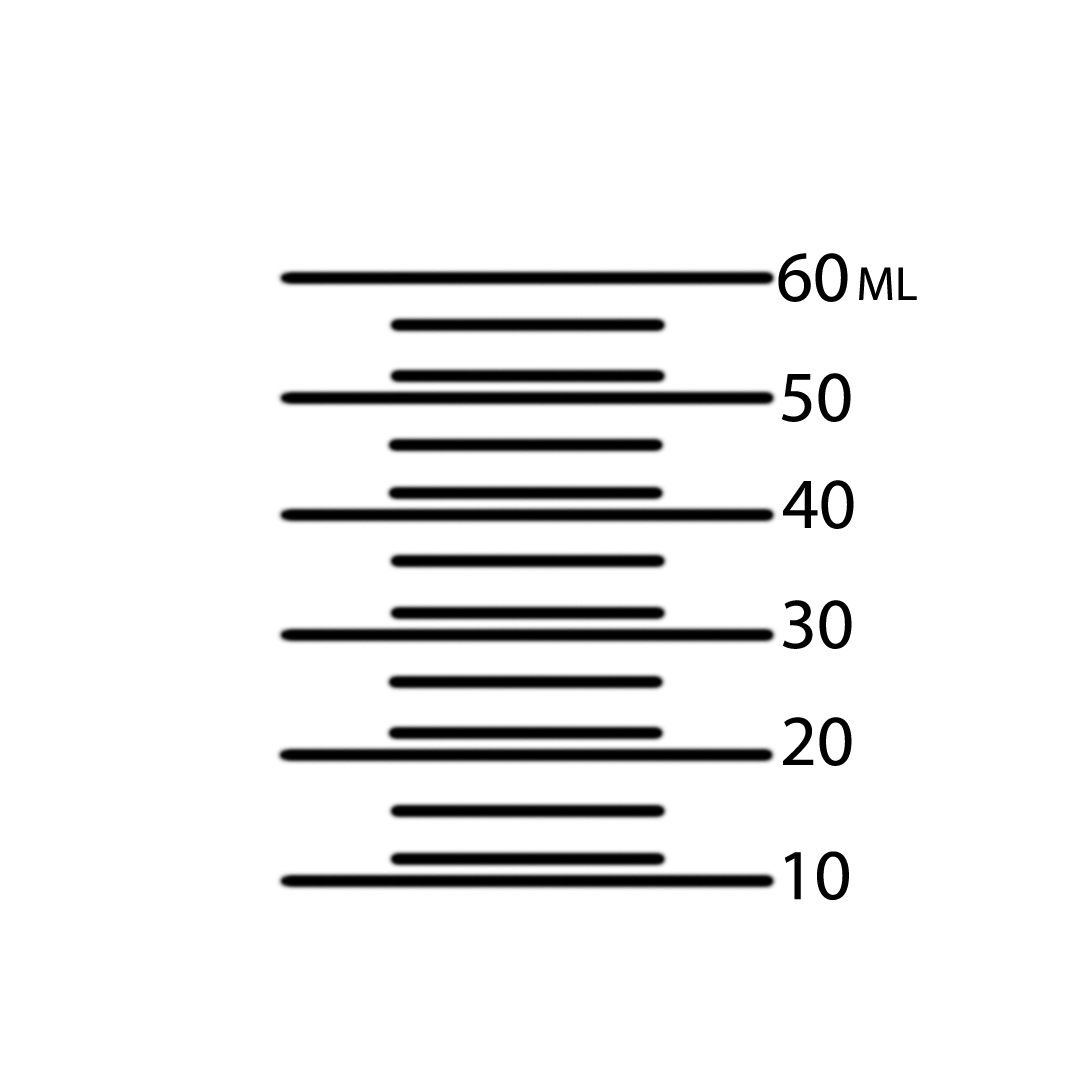
<style>
.page{position:relative;width:1080px;height:1080px;background:#ffffff}
.page>*{position:absolute;margin:0}
.t1{font:72px "MyriadHebrew-Regular";color:#000000}
.t2{font:48px "MyriadHebrew-Regular";color:#000000}
</style>
<div class="page">
<p class="t1" style="left:778px;top:253px;width:70px;height:49px">60</p>
<p class="t2" style="left:859px;top:267px;width:58px;height:33px">ML</p>
<p class="t1" style="left:782px;top:373px;width:69px;height:49px">50</p>
<p class="t1" style="left:783px;top:480px;width:71px;height:49px">40</p>
<p class="t1" style="left:783px;top:600px;width:69px;height:49px">30</p>
<p class="t1" style="left:783px;top:717px;width:69px;height:49px">20</p>
<p class="t1" style="left:785px;top:851px;width:64px;height:49px">10</p>
</div>
